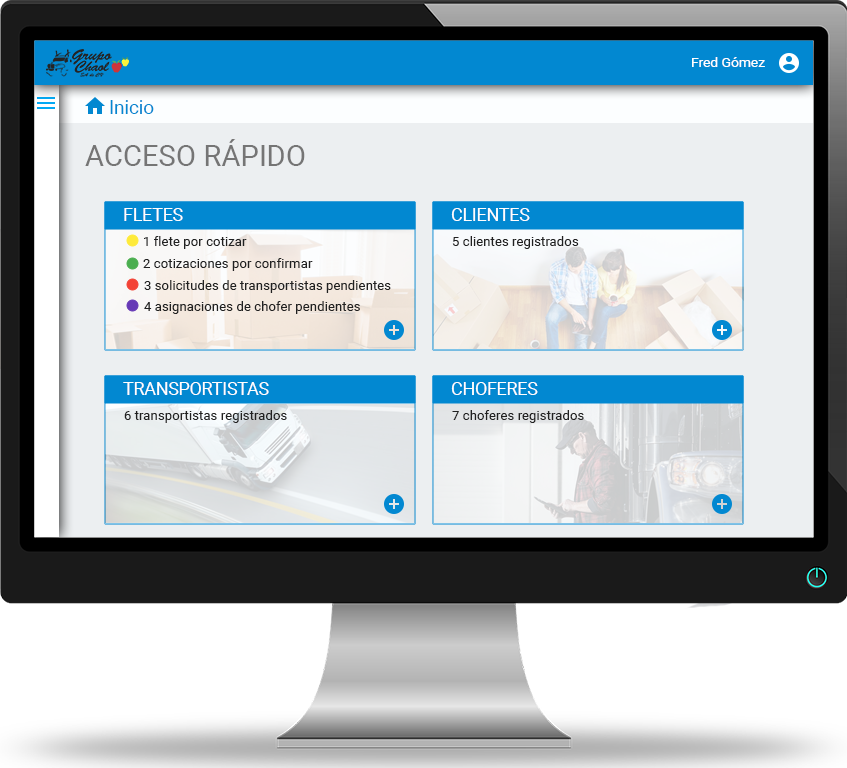
<style>
.page{position:relative;width:847px;height:768px}
.page>*{position:absolute;margin:0}
.t1{font:13.3px "Roboto-Regular";color:#ffffff;scale:1.04 1}
.t2{font:18.6px "Roboto-Regular";color:#0288d1}
.t3{font:29.1px "Roboto-Regular";color:#757575}
.t4{font:17.8px "Roboto-Regular";color:#fffefe}
.t5{font:13.3px "Roboto-Regular";color:#212121}
</style>
<div class="page">
<p class="t1" style="left:692px;top:57px;width:73px;height:10px">Fred Gómez</p>
<p class="t2" style="left:110px;top:100px;width:44px;height:14px">Inicio</p>
<p class="t3" style="left:85px;top:139px;width:220px;height:27px">ACCESO RÁPIDO</p>
<p class="t4" style="left:124px;top:208px;width:59px;height:13px">FLETES</p>
<p class="t4" style="left:451px;top:208px;width:79px;height:13px">CLIENTES</p>
<p class="t5" style="left:144px;top:236px;width:103px;height:13px">1 flete por cotizar</p>
<p class="t5" style="left:452px;top:236px;width:127px;height:13px">5 clientes registrados</p>
<p class="t5" style="left:143px;top:258px;width:170px;height:13px">2 cotizaciones por confirmar</p>
<p class="t5" style="left:144px;top:280px;width:247px;height:13px">3 solicitudes de transportistas pendientes</p>
<p class="t5" style="left:144px;top:301px;width:216px;height:13px">4 asignaciones de chofer pendientes</p>
<p class="t4" style="left:123px;top:382px;width:146px;height:13px">TRANSPORTISTAS</p>
<p class="t4" style="left:451px;top:382px;width:87px;height:13px">CHOFERES</p>
<p class="t5" style="left:124px;top:410px;width:163px;height:13px">6 transportistas registrados</p>
<p class="t5" style="left:452px;top:410px;width:132px;height:13px">7 choferes registrados</p>
</div>
